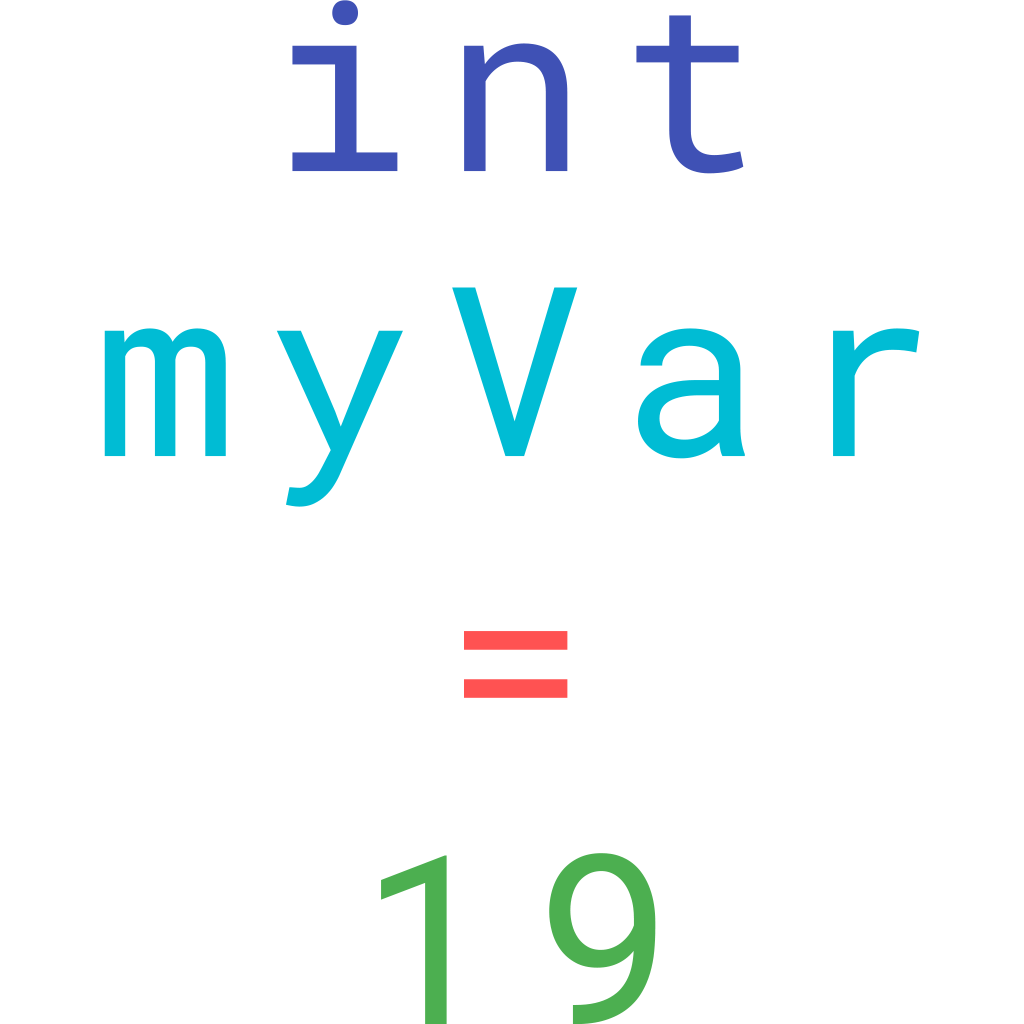
<style>
.page{position:relative;width:1024px;height:1024px;background:#ffffff}
.page>*{position:absolute;margin:0}
.t1{font:236.7px "RobotoMono-Regular";letter-spacing:0.14em;color:#00bcd4}
.t2{font:236.7px "RobotoMono-Regular";letter-spacing:0.14em;color:#3f51b5}
.t3{font:236.7px "RobotoMono-Regular";letter-spacing:0.14em;color:#ff5252}
.t4{font:236.7px "RobotoMono-Regular";letter-spacing:0.14em;color:#4caf50}
</style>
<div class="page">
<p class="t1" style="left:104px;top:0px;width:816px;height:1025px;text-align:center"><span class="t2">int<br></span>myVar<br><span class="t3">=<br></span><span class="t4">19</span></p>
</div>
